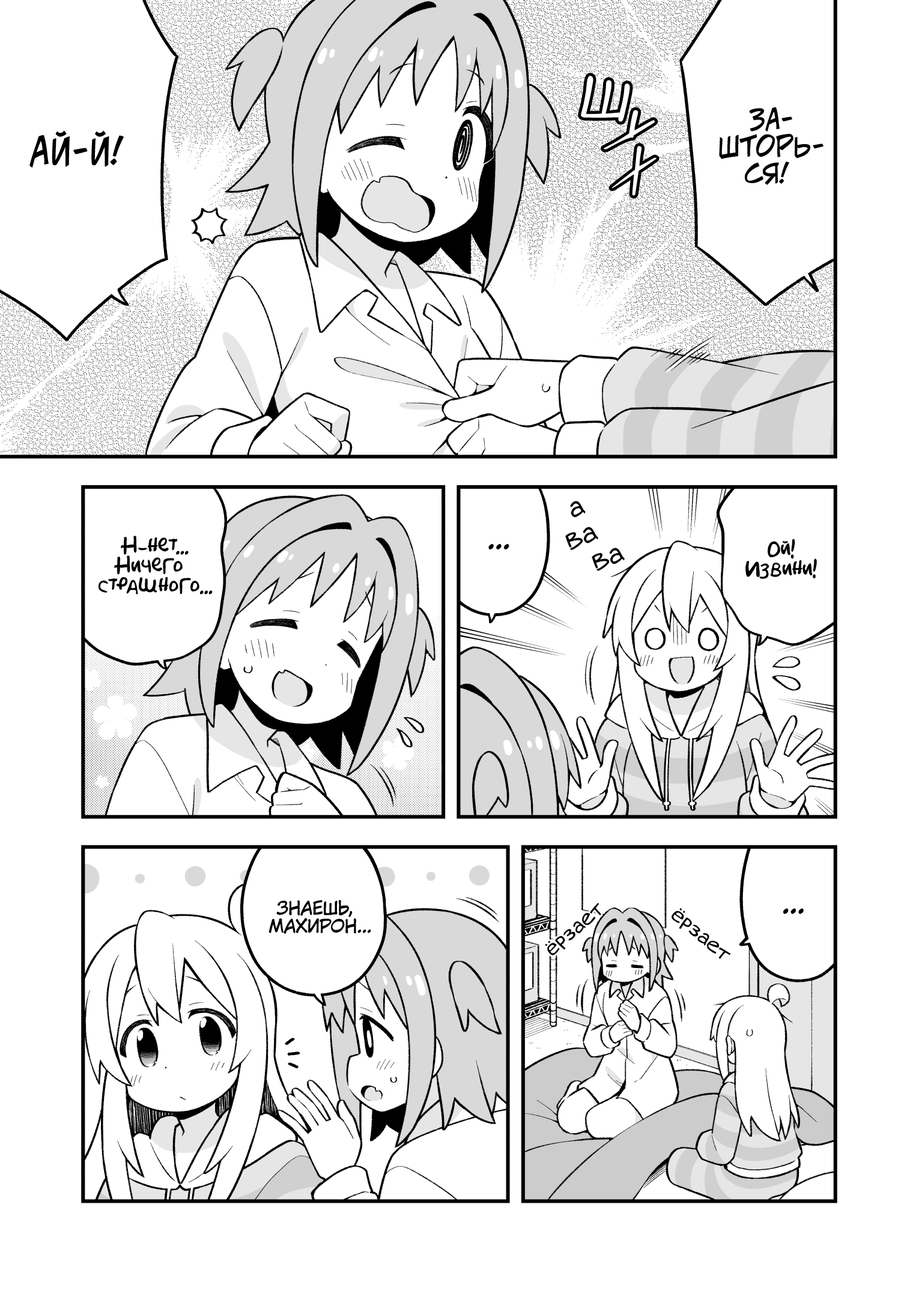
<style>
.page{position:relative;width:919px;height:1297px;background:#ffffff}
.page>*{position:absolute;margin:0}
.t1{font:54.1px "JakobCTT-Regular";color:#ffffff;text-transform:uppercase}
.t2{font:27px "v_CCJeffCampbell";color:#000000;text-transform:uppercase}
.t3{font:36px "v_CCJeffCampbell";color:#000000;text-transform:uppercase}
.t4{font:28.8px "v_Augie";color:#000000}
.t5{font:19.8px "AkbarPlain";color:#000000}
.t6{font:28.8px "KuraiVoice2";color:#000000;text-transform:uppercase}
.t7{font:18px "KuraiVoice2";color:#000000;text-transform:uppercase}
.t8{font:21.6px "v_Augie";color:#000000}
</style>
<div class="page">
<p class="t1" style="left:581px;top:76px;width:49px;height:46px;rotate:14deg">ш</p>
<p class="t2" style="left:719px;top:107px;width:105px;height:78px;text-align:center">За-<br>шторь-<br>ся!</p>
<p class="t3" style="left:29px;top:130px;width:95px;height:38px">Ай-й!</p>
<p class="t4" style="left:565px;top:501px;width:60px;height:70px;text-align:center;rotate:-21deg">а<br>ва<br>ва</p>
<p class="t5" style="left:99px;top:536px;width:114px;height:59px;text-align:center">Н-нет...<br>Ничего<br>страшного...</p>
<p class="t6" style="left:488px;top:544px;width:21px;height:6px">...</p>
<p class="t5" style="left:745px;top:539px;width:72px;height:40px;text-align:center">Ой!<br>Извини!</p>
<p class="t7" style="left:269px;top:900px;width:102px;height:34px;text-align:center">Знаешь,<br>Махирон...</p>
<p class="t8" style="left:545px;top:903px;width:56px;height:53px;rotate:-41deg">ёрзает</p>
<p class="t8" style="left:672px;top:908px;width:59px;height:51px;rotate:40deg">ёрзает</p>
<p class="t6" style="left:783px;top:909px;width:21px;height:5px">...</p>
</div>
